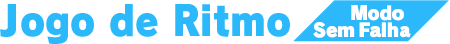
<style>
.page{position:relative;width:450px;height:44px;background:#ffffff}
.page>*{position:absolute;margin:0}
.t1{font:40.8px "RodinPro-UB";color:#2bb9fb;scale:0.92 1}
.t2{font:18.7px "RodinNTLGPro-UB";letter-spacing:-0.03em;color:#ffffff}
</style>
<div class="page">
<p class="t1" style="left:0px;top:4px;width:290px;height:40px">Jogo de Ritmo</p>
<p class="t2" style="left:351px;top:5px;width:53px;height:16px">Modo</p>
<p class="t2" style="left:313px;top:22px;width:42px;height:16px">Sem</p>
<p class="t2" style="left:359px;top:22px;width:52px;height:16px">Falha</p>
</div>
